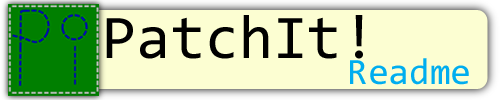
<style>
.page{position:relative;width:500px;height:100px;background:#fcfed2}
.page>*{position:absolute;margin:0}
.t1{font:62.3px "Consolas";color:#000000}
.t2{font:37.4px "Consolas";color:#00adef}
</style>
<div class="page">
<p class="t1" style="left:106px;top:15px;width:257px;height:44px">PatchIt!</p>
<p class="t2" style="left:350px;top:58px;width:119px;height:27px">Readme</p>
</div>
